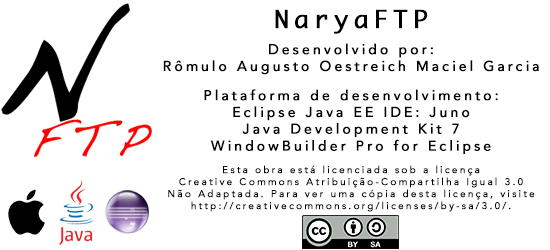
<style>
.page{position:relative;width:550px;height:250px;background:#ffffff}
.page>*{position:absolute;margin:0}
.t1{font:24px "Ayuthaya";letter-spacing:0.2em;color:#000000;font-weight:bold}
.t2{font:14px "Avenir-Roman";letter-spacing:0.2em;color:#000000;font-weight:bold}
.t3{font:10px "Avenir-Roman";letter-spacing:0.2em;color:#000000;font-weight:bold}
</style>
<div class="page">
<p class="t1" style="left:275px;top:9px;width:153px;height:25px">NaryaFTP</p>
<p class="t2" style="left:163px;top:43px;width:376px;height:32px;text-align:center">Desenvolvido por:<br>Rômulo Augusto Oestreich Maciel Garcia</p>
<p class="t2" style="left:204px;top:89px;width:294px;height:65px;text-align:center">Plataforma de desenvolvimento:<br>Eclipse Java EE IDE: Juno<br>Java Development Kit 7<br>WindowBuilder Pro for Eclipse</p>
<p class="t3" style="left:168px;top:165px;width:367px;height:47px;text-align:center">Esta obra está licenciada sob a licença<br>Creative Commons Atribuição-Compartilha Igual 3.0<br>Não Adaptada. Para ver uma cópia desta licença, visite<br>http://creativecommons.org/licenses/by-sa/3.0/.</p>
</div>
